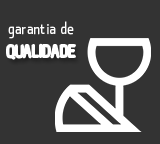
<style>
.page{position:relative;width:160px;height:144px;background:#333333}
.page>*{position:absolute;margin:0}
.t1{font:16.7px "qontra-Regular";color:#ffffff}
</style>
<div class="page">
<p class="t1" style="left:8px;top:21px;width:66px;height:18px">garantia de</p>
<p class="t1" style="left:7px;top:44px;width:68px;height:15px">QUALIDADE</p>
</div>
